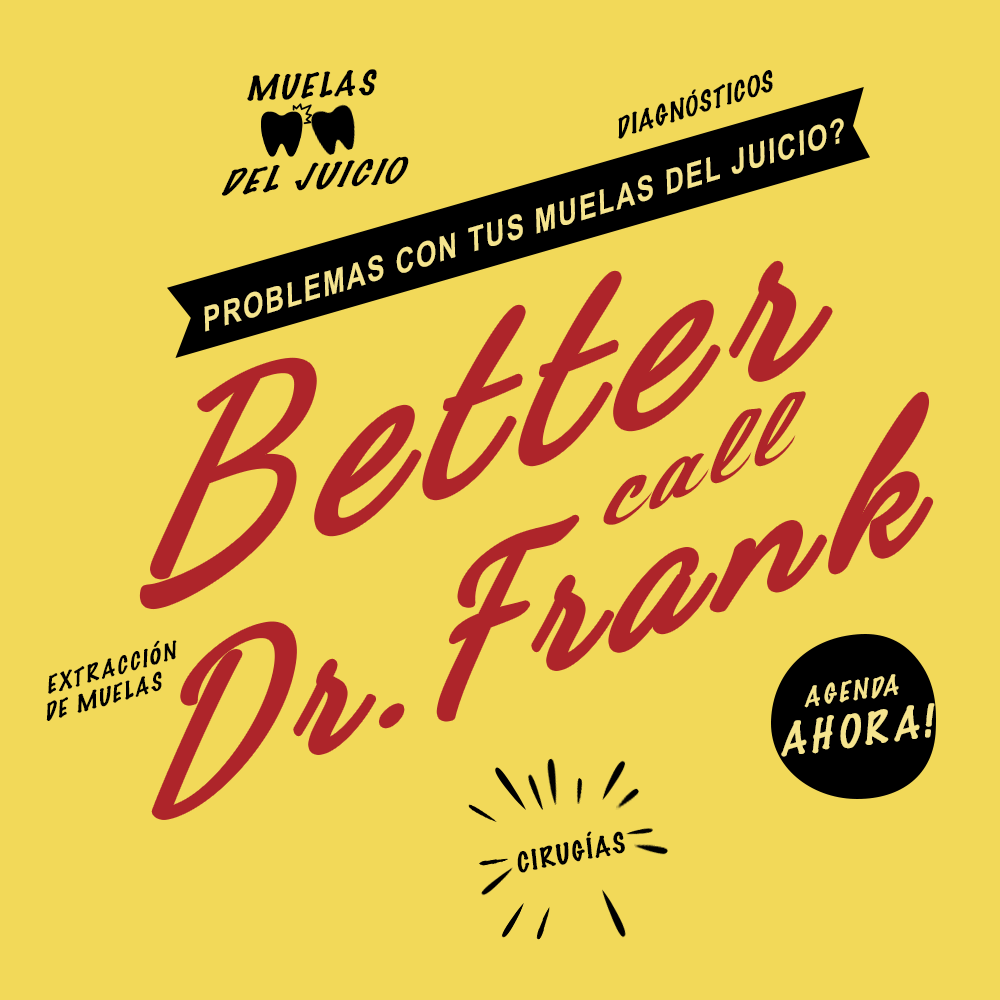
<style>
.page{position:relative;width:1000px;height:1000px;background:#f2d959}
.page>*{position:absolute;margin:0}
.t1{font:32.2px "MarkerFelt-Thin";letter-spacing:0.075em;color:#000000;scale:1.04 1}
.t2{font:26.6px "MarkerFelt-Thin";letter-spacing:0.025em;color:#000000}
.t3{font:31.9px "MarkerFelt-Thin";letter-spacing:0.025em;color:#000000}
.t4{font:34.3px "Arial-BoldMT";letter-spacing:0.075em;color:#f5e48e;scale:0.79 1}
.t5{font:36.3px "MarkerFelt-Thin";letter-spacing:0.075em;color:#000000;scale:1.03 1}
.t6{font:273.5px "DancingScriptOT";letter-spacing:0.1em;color:#ae252a;scale:0.96 1}
.t7{font:213.6px "DancingScriptOT";letter-spacing:0.1em;color:#ae252a;scale:0.96 1}
.t8{font:91.1px "SCRIPT1-Script-Casual-Normal";letter-spacing:0.1em;color:#ae252a;scale:0.96 1}
.t9{font:22.8px "MarkerFelt-Thin";letter-spacing:0.075em;color:#000000}
.t10{font:28.6px "MarkerFelt-Thin";letter-spacing:0.075em;color:#000000}
.t11{font:25.6px "MarkerFelt-Thin";letter-spacing:0.1em;color:#f5e48e}
.t12{font:42px "MarkerFelt-Thin";letter-spacing:0.1em;color:#f5e48e}
.t13{font:25.6px "MarkerFelt-Thin";letter-spacing:0.05em;color:#000000;scale:1.04 1}
.t14{font:32.4px "MarkerFelt-Thin";letter-spacing:0.05em;color:#000000;scale:1.04 1}
</style>
<div class="page">
<p class="t1" style="left:247px;top:69px;width:130px;height:32px;rotate:-3deg">MUELAS</p>
<p class="t2" style="left:618px;top:70px;width:155px;height:69px;rotate:-17deg">DIAGN<span class="t3">Ó</span>STICOS</p>
<p class="t4" style="left:204px;top:118px;width:640px;height:214px;rotate:-17deg">PROBLEMAS CON TUS MUELAS DEL JUICIO?</p>
<p class="t5" style="left:222px;top:156px;width:187px;height:40px;rotate:-4deg">DEL JUICIO</p>
<p class="t6" style="left:143px;top:264px;width:686px;height:342px;rotate:-19deg">Better</p>
<p class="t7" style="left:155px;top:395px;width:775px;height:421px;rotate:-19deg">Dr.Frank</p>
<p class="t8" style="left:603px;top:391px;width:203px;height:134px;rotate:-21deg">call</p>
<p class="t9" style="left:46px;top:640px;width:131px;height:81px;rotate:-15deg">EXTRACCI<span class="t10">ó</span>N<br>DE MUELAS</p>
<p class="t11" style="left:804px;top:674px;width:95px;height:34px;rotate:-8deg">AGENDA</p>
<p class="t12" style="left:781px;top:703px;width:154px;height:54px;rotate:-8deg">AHORA!</p>
<p class="t13" style="left:517px;top:831px;width:108px;height:42px;rotate:-11deg">CIRUG<span class="t14">Í</span>AS</p>
</div>
